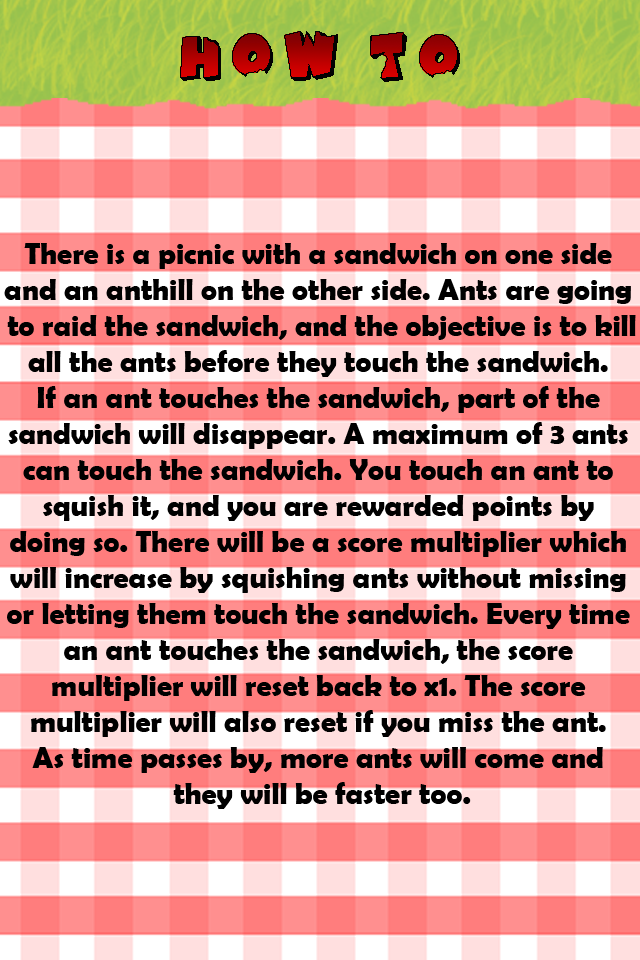
<style>
.page{position:relative;width:640px;height:960px}
.page>*{position:absolute;margin:0}
.t1{font:30px "BerlinSansFBDemi-Bold";color:#000000}
</style>
<div class="page">
<p class="t1" style="left:4px;top:243px;width:632px;height:566px;text-align:center">There is a picnic with a sandwich on one side <br>and an anthill on the other side. Ants are going <br>to raid the sandwich, and the objective is to kill<br>all the ants before they touch the sandwich. <br>If an ant touches the sandwich, part of the <br>sandwich will disappear. A maximum of 3 ants <br>can touch the sandwich. You touch an ant to <br>squish it, and you are rewarded points by <br>doing so. There will be a score multiplier which <br>will increase by squishing ants without missing <br>or letting them touch the sandwich. Every time <br>an ant touches the sandwich, the score <br>multiplier will reset back to x1. The score <br>multiplier will also reset if you miss the ant. <br>As time passes by, more ants will come and <br>they will be faster too.</p>
</div>
